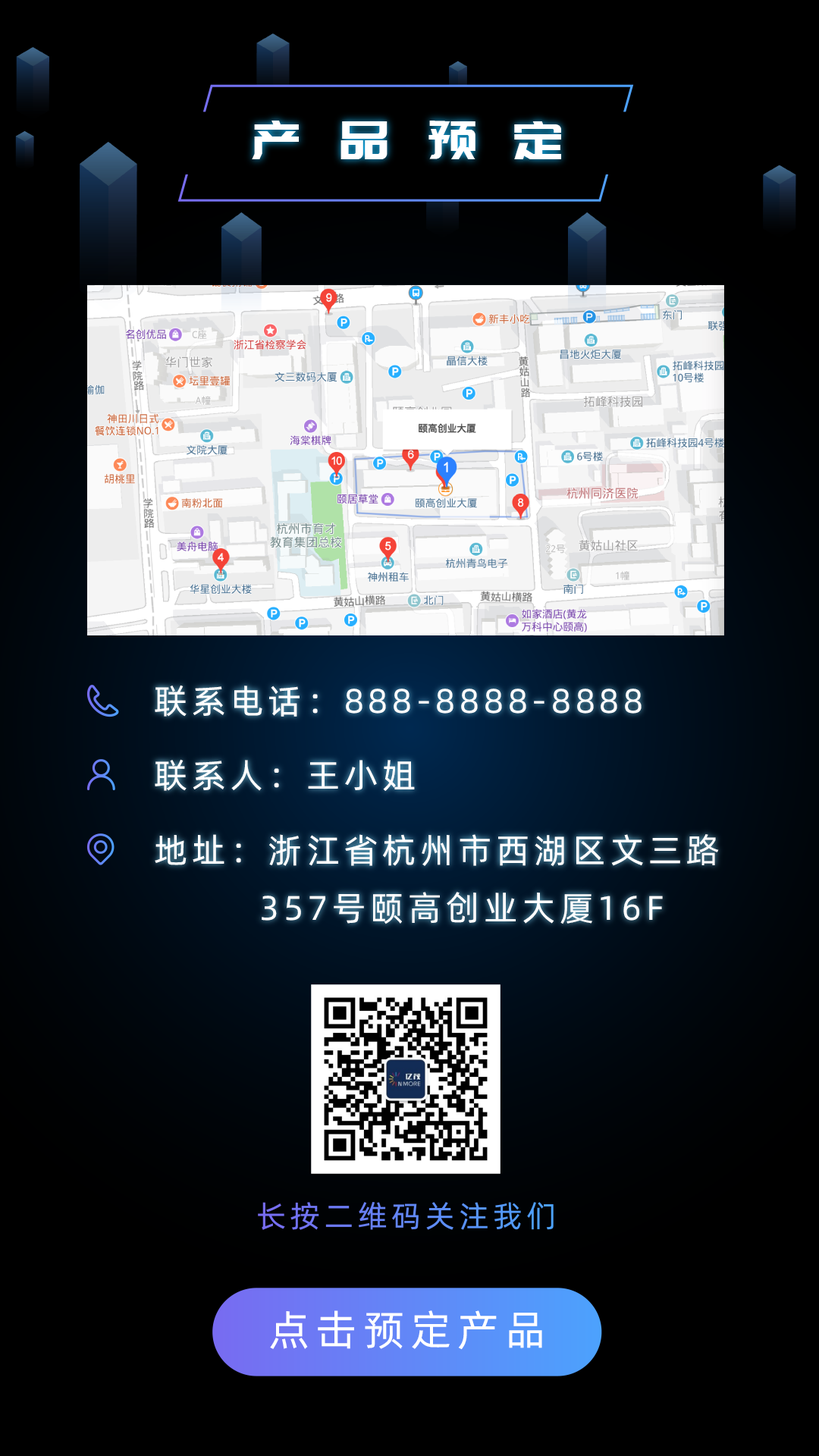
<style>
.page{position:relative;width:819px;height:1456px;background:#000000}
.page>*{position:absolute;margin:0}
.t1{font:53.1px "PangMenZhengDao";letter-spacing:0.7em;color:#ffffff}
.t2{font:34.1px "AlibabaPuHuiTi-Regular";letter-spacing:0.13em;color:#ffffff}
.t3{font:34.1px/39.4px "AlibabaPuHuiTi-Regular";letter-spacing:0.13em;color:#ffffff}
.t4{font:34.1px/63.7px "AlibabaPuHuiTi-Regular";letter-spacing:0.13em;color:#ffffff}
.t5{font:34.1px/57.6px "AlibabaPuHuiTi-Regular";letter-spacing:0.13em;color:#ffffff}
.t6{font:41.7px "AlibabaPuHuiTi-Regular";letter-spacing:0.15em;color:#ffffff}
</style>
<div class="page">
<p class="t1" style="left:252px;top:121px;width:309px;height:38px">产品预定</p>
<p class="t2" style="left:155px;top:685px;width:487px;height:32px">联系电话：888-8888-8888</p>
<p class="t2" style="left:155px;top:759px;width:260px;height:32px">联系人：王小姐</p>
<p class="t3" style="left:155px;top:834px;width:564px;height:90px"><span class="t4">地址：</span><span class="t5">浙江省杭州市西湖区文三路<br>        </span>357号颐高创业大厦16F</p>
<p class="t6" style="left:270px;top:1310px;width:272px;height:40px">点击预定产品</p>
</div>
